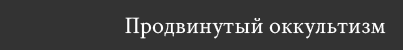
<style>
.page{position:relative;width:403px;height:50px;background:#333333}
.page>*{position:absolute;margin:0}
.t1{font:24px "CrimsonText-Regular";color:#ffffff}
</style>
<div class="page">
<p class="t1" style="left:125px;top:17px;width:261px;height:22px">Продвинутый оккультизм</p>
</div>
